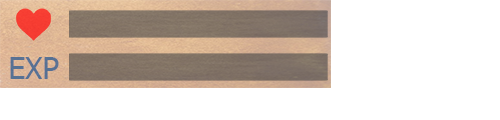
<style>
.page{position:relative;width:500px;height:120px;background:#ffffff}
.page>*{position:absolute;margin:0}
.t1{font:30px "Tahoma";color:#587193}
</style>
<div class="page">
<p class="t1" style="left:10px;top:57px;width:49px;height:22px">EXP</p>
</div>
